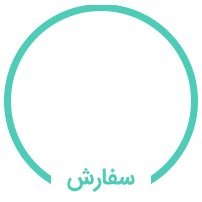
<style>
.page{position:relative;width:202px;height:202px;background:#ffffff}
.page>*{position:absolute;margin:0}
.t1{font:23px "IRANSansMobile-Bold";color:#4dccb7}
</style>
<div class="page">
<p class="t1" style="left:67px;top:167px;width:68px;height:25px">سفارش</p>
</div>
